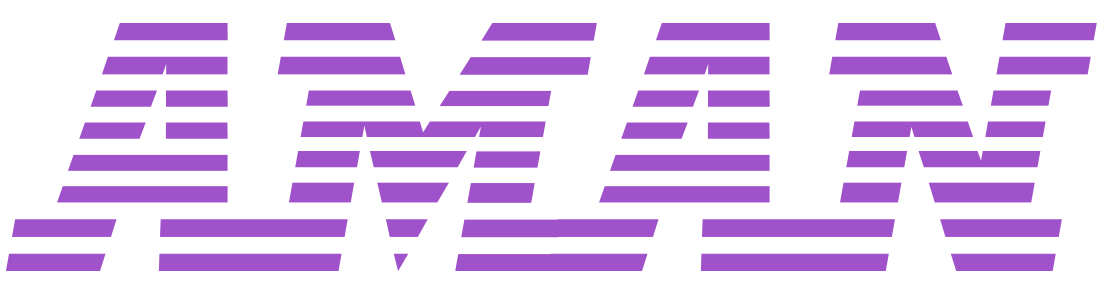
<style>
.page{position:relative;width:1107px;height:294px;background:#ffffff}
.page>*{position:absolute;margin:0}
.t1{font:357.3px "MeninBlue";color:#a052ca}
</style>
<div class="page">
<p class="t1" style="left:5px;top:23px;width:1092px;height:248px">Aman</p>
</div>
